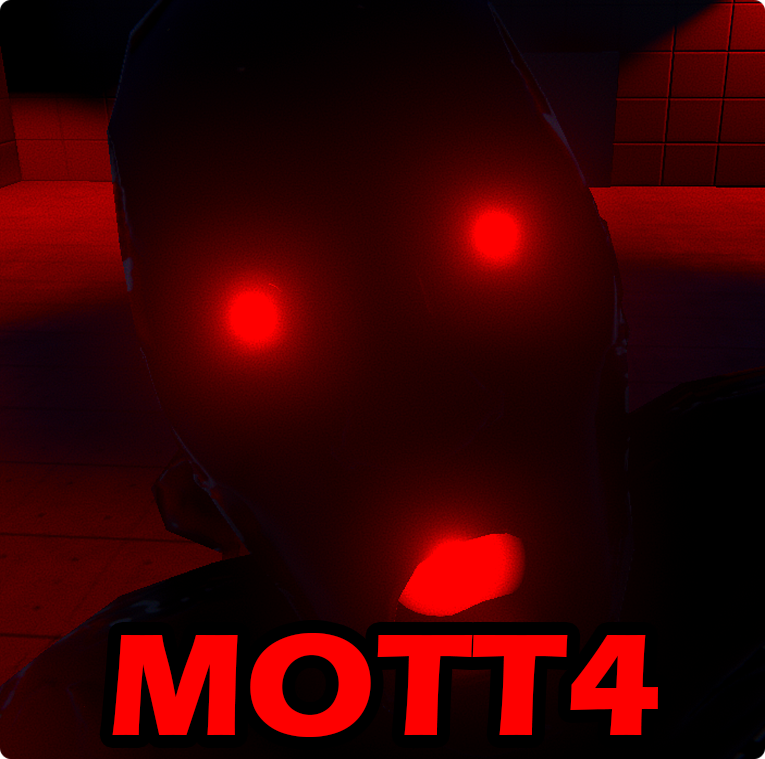
<style>
.page{position:relative;width:765px;height:759px}
.page>*{position:absolute;margin:0}
.t1{font:150px "ErasITC-Bold";color:#fe0000}
</style>
<div class="page">
<p class="t1" style="left:112px;top:633px;width:546px;height:104px">MOTT4</p>
</div>
